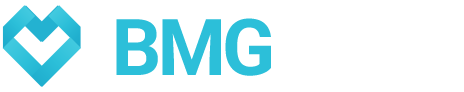
<style>
.page{position:relative;width:464px;height:92px;background:#ffffff}
.page>*{position:absolute;margin:0}
.t1{font:78.2px "Roboto-Bold";letter-spacing:-0.05em;color:#2cbfd9}
</style>
<div class="page">
<p class="t1" style="left:116px;top:18px;width:155px;height:58px">BMG</p>
</div>
